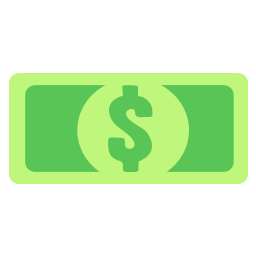
<style>
.page{position:relative;width:256px;height:256px;background:#ffffff}
.page>*{position:absolute;margin:0}
.t1{font:102.2px "LondrinaSolid-Regular";color:#5ac557;scale:1.07 1}
</style>
<div class="page">
<p class="t1" style="left:108px;top:85px;width:45px;height:88px">$</p>
</div>
